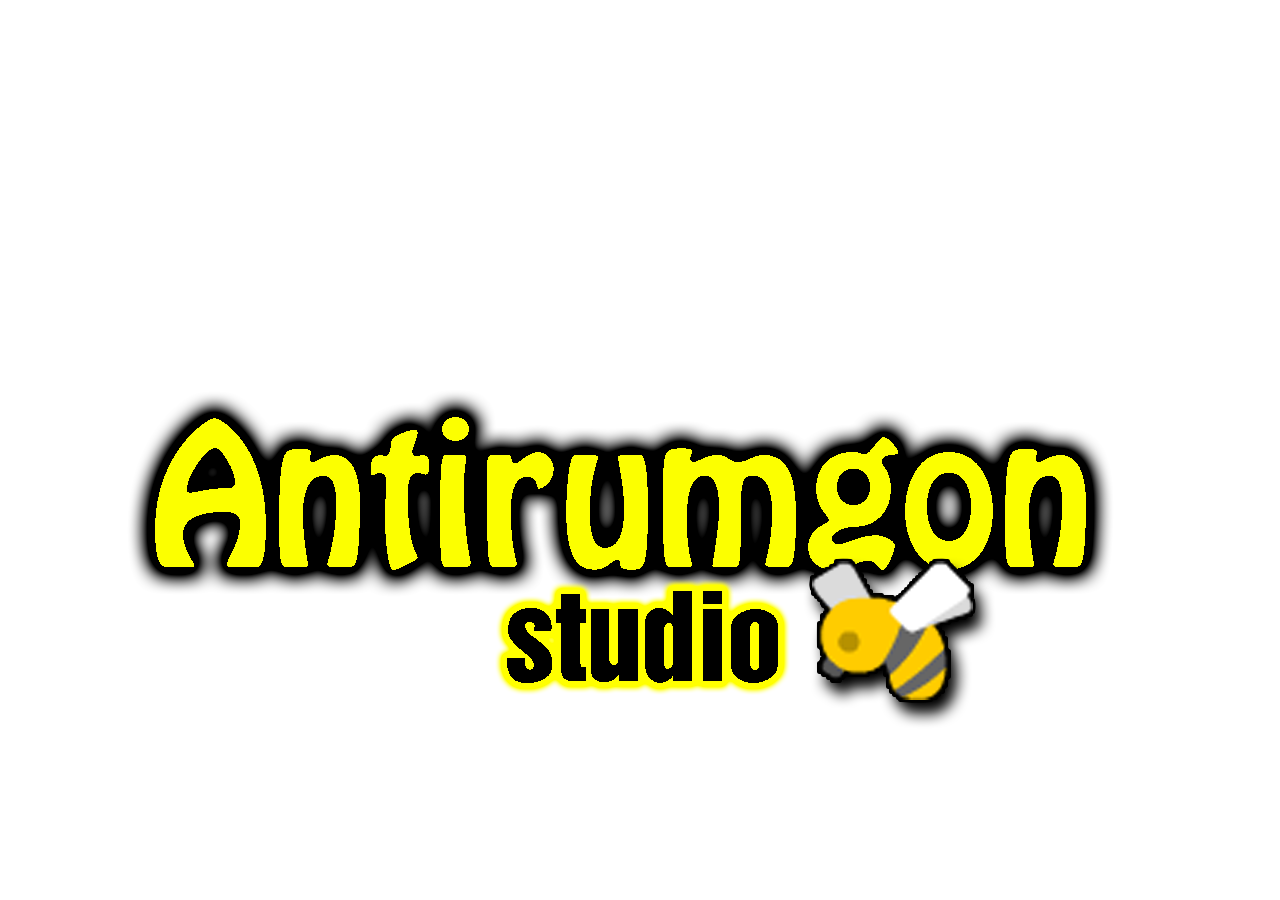
<style>
.page{position:relative;width:1280px;height:900px;background:#ffffff}
.page>*{position:absolute;margin:0}
.t1{font:175.7px "HoboStd";color:#fcff00}
.t2{font:122.7px "HelveticaInserat-Roman-SemiBold";color:#000000}
</style>
<div class="page">
<p class="t1" style="left:155px;top:417px;width:931px;height:153px">Antirumgon</p>
<p class="t2" style="left:507px;top:591px;width:271px;height:92px">studio</p>
</div>
